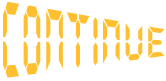
<style>
.page{position:relative;width:166px;height:81px;background:#ffffff}
.page>*{position:absolute;margin:0}
.t1{font:75px "QuartzMS";color:#ffbf2e;scale:0.48 1}
</style>
<div class="page">
<p class="t1" style="left:3px;top:1px;width:162px;height:77px">CONTINUE</p>
</div>
